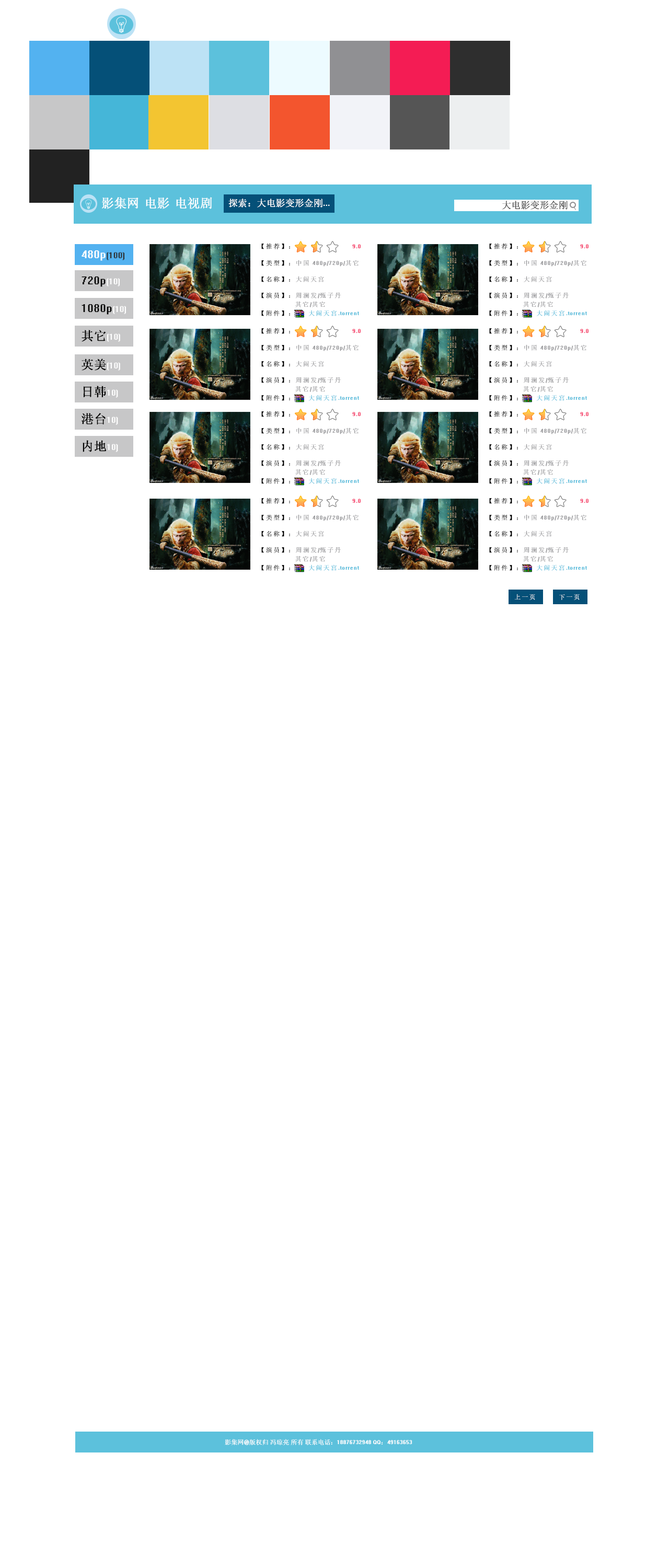
<style>
.page{position:relative;width:669px;height:1568px;background:#ffffff}
.page>*{position:absolute;margin:0}
.t1{font:12.5px "System";color:#ffffff}
.t2{font:12.6px "System";color:#ffffff}
.t3{font:9.4px "System";color:#ffffff}
.t4{font:9.4px "System";color:#555555}
.t5{font:7.3px "System";color:#909093}
.t6{font:7.3px "System";color:#000000}
.t7{font:7.3px "System";color:#f41c54}
.t8{font:7.3px "System";color:#45b6d8}
.t9{font:9.4px "System";color:#2e2e2e}
.t10{font:12.5px "System";color:#000000}
.t11{font:7.3px "System";color:#ffffff}
.t12{font:6.3px "System";color:#ffffff}
</style>
<div class="page">
<p class="t1" style="left:102px;top:197px;width:37px;height:12px">影集网</p>
<p class="t2" style="left:146px;top:197px;width:23px;height:12px">电影</p>
<p class="t2" style="left:176px;top:197px;width:36px;height:12px">电视剧</p>
<p class="t3" style="left:228px;top:199px;width:102px;height:8px">探索：大电影变形金刚...</p>
<p class="t4" style="left:502px;top:201px;width:66px;height:9px">大电影变形金刚</p>
<p class="t5" style="left:261px;top:243px;width:100px;height:73px"><span class="t6">【推荐】：                               </span><span class="t7">9.0<br><br></span><span class="t6">【类型】：</span>中国 480p/720p/其它<br><br><span class="t6">【名称】：</span>大闹天宫<br><br><span class="t6">【演员】：</span>周澜发/甄子丹<br>                    其它/其它<br><span class="t6">【附件】：       </span><span class="t8">大闹天宫.torrent</span></p>
<p class="t5" style="left:489px;top:243px;width:100px;height:73px"><span class="t6">【推荐】：                               </span><span class="t7">9.0<br><br></span><span class="t6">【类型】：</span>中国 480p/720p/其它<br><br><span class="t6">【名称】：</span>大闹天宫<br><br><span class="t6">【演员】：</span>周澜发/甄子丹<br>                    其它/其它<br><span class="t6">【附件】：       </span><span class="t8">大闹天宫.torrent</span></p>
<p class="t9" style="left:82px;top:250px;width:42px;height:11px"><span class="t1">480p</span>(100)</p>
<p class="t10" style="left:82px;top:276px;width:38px;height:11px">720p<span class="t3">(10)</span></p>
<p class="t10" style="left:82px;top:304px;width:44px;height:11px">1080p<span class="t3">(10)</span></p>
<p class="t3" style="left:82px;top:330px;width:38px;height:12px"><span class="t10">其它</span>(10)</p>
<p class="t5" style="left:261px;top:328px;width:100px;height:73px"><span class="t6">【推荐】：                               </span><span class="t7">9.0<br><br></span><span class="t6">【类型】：</span>中国 480p/720p/其它<br><br><span class="t6">【名称】：</span>大闹天宫<br><br><span class="t6">【演员】：</span>周澜发/甄子丹<br>                    其它/其它<br><span class="t6">【附件】：       </span><span class="t8">大闹天宫.torrent</span></p>
<p class="t5" style="left:489px;top:328px;width:100px;height:73px"><span class="t6">【推荐】：                               </span><span class="t7">9.0<br><br></span><span class="t6">【类型】：</span>中国 480p/720p/其它<br><br><span class="t6">【名称】：</span>大闹天宫<br><br><span class="t6">【演员】：</span>周澜发/甄子丹<br>                    其它/其它<br><span class="t6">【附件】：       </span><span class="t8">大闹天宫.torrent</span></p>
<p class="t3" style="left:82px;top:359px;width:38px;height:12px"><span class="t10">英美</span>(10)</p>
<p class="t3" style="left:84px;top:386px;width:34px;height:12px"><span class="t10">日韩</span>10)</p>
<p class="t3" style="left:81px;top:413px;width:37px;height:12px"><span class="t10">港台</span>10)</p>
<p class="t5" style="left:261px;top:411px;width:100px;height:73px"><span class="t6">【推荐】：                               </span><span class="t7">9.0<br><br></span><span class="t6">【类型】：</span>中国 480p/720p/其它<br><br><span class="t6">【名称】：</span>大闹天宫<br><br><span class="t6">【演员】：</span>周澜发/甄子丹<br>                    其它/其它<br><span class="t6">【附件】：       </span><span class="t8">大闹天宫.torrent</span></p>
<p class="t5" style="left:489px;top:411px;width:100px;height:73px"><span class="t6">【推荐】：                               </span><span class="t7">9.0<br><br></span><span class="t6">【类型】：</span>中国 480p/720p/其它<br><br><span class="t6">【名称】：</span>大闹天宫<br><br><span class="t6">【演员】：</span>周澜发/甄子丹<br>                    其它/其它<br><span class="t6">【附件】：       </span><span class="t8">大闹天宫.torrent</span></p>
<p class="t3" style="left:83px;top:440px;width:35px;height:12px"><span class="t10">内地</span>10)</p>
<p class="t5" style="left:261px;top:498px;width:100px;height:73px"><span class="t6">【推荐】：                               </span><span class="t7">9.0<br><br></span><span class="t6">【类型】：</span>中国 480p/720p/其它<br><br><span class="t6">【名称】：</span>大闹天宫<br><br><span class="t6">【演员】：</span>周澜发/甄子丹<br>                    其它/其它<br><span class="t6">【附件】：       </span><span class="t8">大闹天宫.torrent</span></p>
<p class="t5" style="left:489px;top:498px;width:100px;height:73px"><span class="t6">【推荐】：                               </span><span class="t7">9.0<br><br></span><span class="t6">【类型】：</span>中国 480p/720p/其它<br><br><span class="t6">【名称】：</span>大闹天宫<br><br><span class="t6">【演员】：</span>周澜发/甄子丹<br>                    其它/其它<br><span class="t6">【附件】：       </span><span class="t8">大闹天宫.torrent</span></p>
<p class="t11" style="left:514px;top:594px;width:21px;height:6px">上一页</p>
<p class="t11" style="left:559px;top:594px;width:21px;height:6px">下一页</p>
<p class="t12" style="left:225px;top:1439px;width:187px;height:6px">影集网@版权归 冯琼亮 所有 联系电话：18876732948 QQ：49163653</p>
</div>
